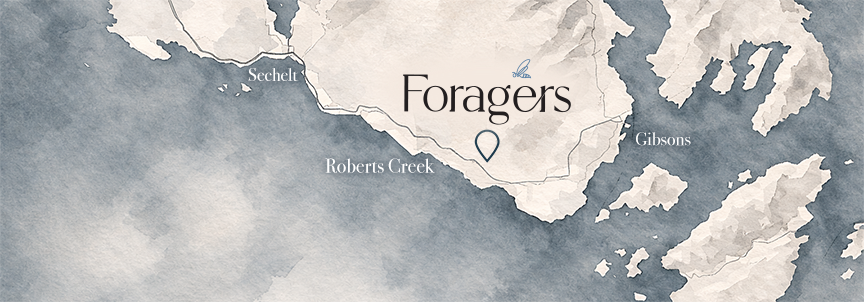
<style>
.page{position:relative;width:864px;height:302px}
.page>*{position:absolute;margin:0}
.t1{font:18px "BodoniSvtyTwoOSITCTT-Book";color:#ffffff}
.t2{font:20px "BodoniSvtyTwoOSITCTT-Book";color:#ffffff}
</style>
<div class="page">
<p class="t1" style="left:248px;top:68px;width:50px;height:13px">Sechelt</p>
<p class="t1" style="left:636px;top:132px;width:55px;height:14px">Gibsons</p>
<p class="t2" style="left:325px;top:158px;width:110px;height:15px">Roberts Creek</p>
</div>
